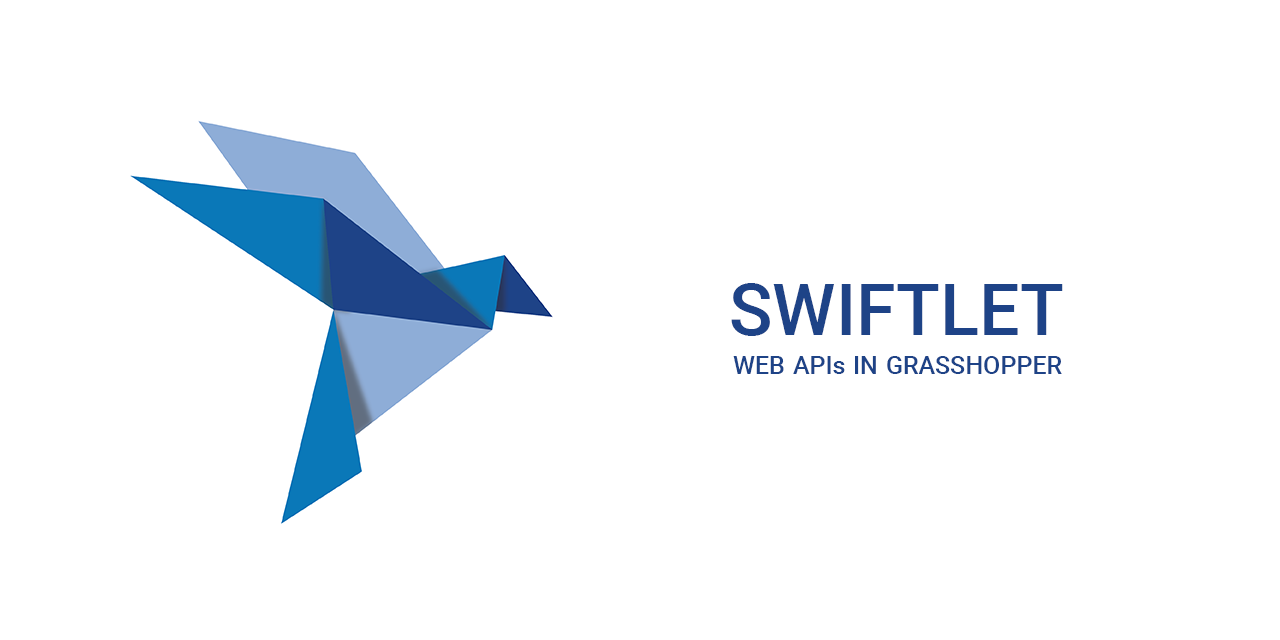
<style>
.page{position:relative;width:1280px;height:640px;background:#ffffff}
.page>*{position:absolute;margin:0}
.t1{font:72px "Roboto-Medium";color:#1e4387}
.t2{font:25px "Roboto-Medium";color:#1e4387}
</style>
<div class="page">
<p class="t1" style="left:731px;top:283px;width:332px;height:53px">SWIFTLET</p>
<p class="t2" style="left:733px;top:356px;width:329px;height:18px">WEB APIs IN GRASSHOPPER</p>
</div>
